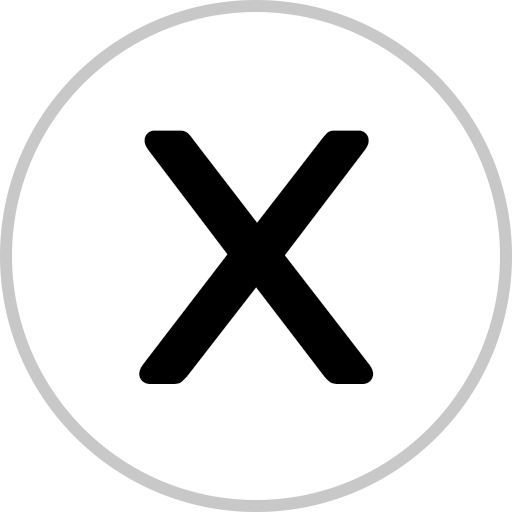
<style>
.page{position:relative;width:512px;height:512px;background:#ffffff}
.page>*{position:absolute;margin:0}
.t1{font:487.5px "Rubik-Regular";color:#000000}
</style>
<div class="page">
<p class="t1" style="left:139px;top:130px;width:235px;height:254px">x</p>
</div>
